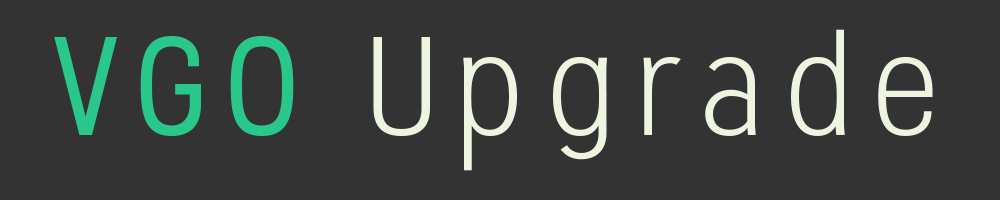
<style>
.page{position:relative;width:1000px;height:200px;background:#333333}
.page>*{position:absolute;margin:0}
.t1{font:140px "Stellar-Light";letter-spacing:0.1em;color:#edf5e1}
.t2{font:140px "Stellar-Regular";letter-spacing:0.1em;color:#29c78c}
</style>
<div class="page">
<p class="t1" style="left:54px;top:29px;width:879px;height:142px"><span class="t2">VGO </span>Upgrade</p>
</div>
